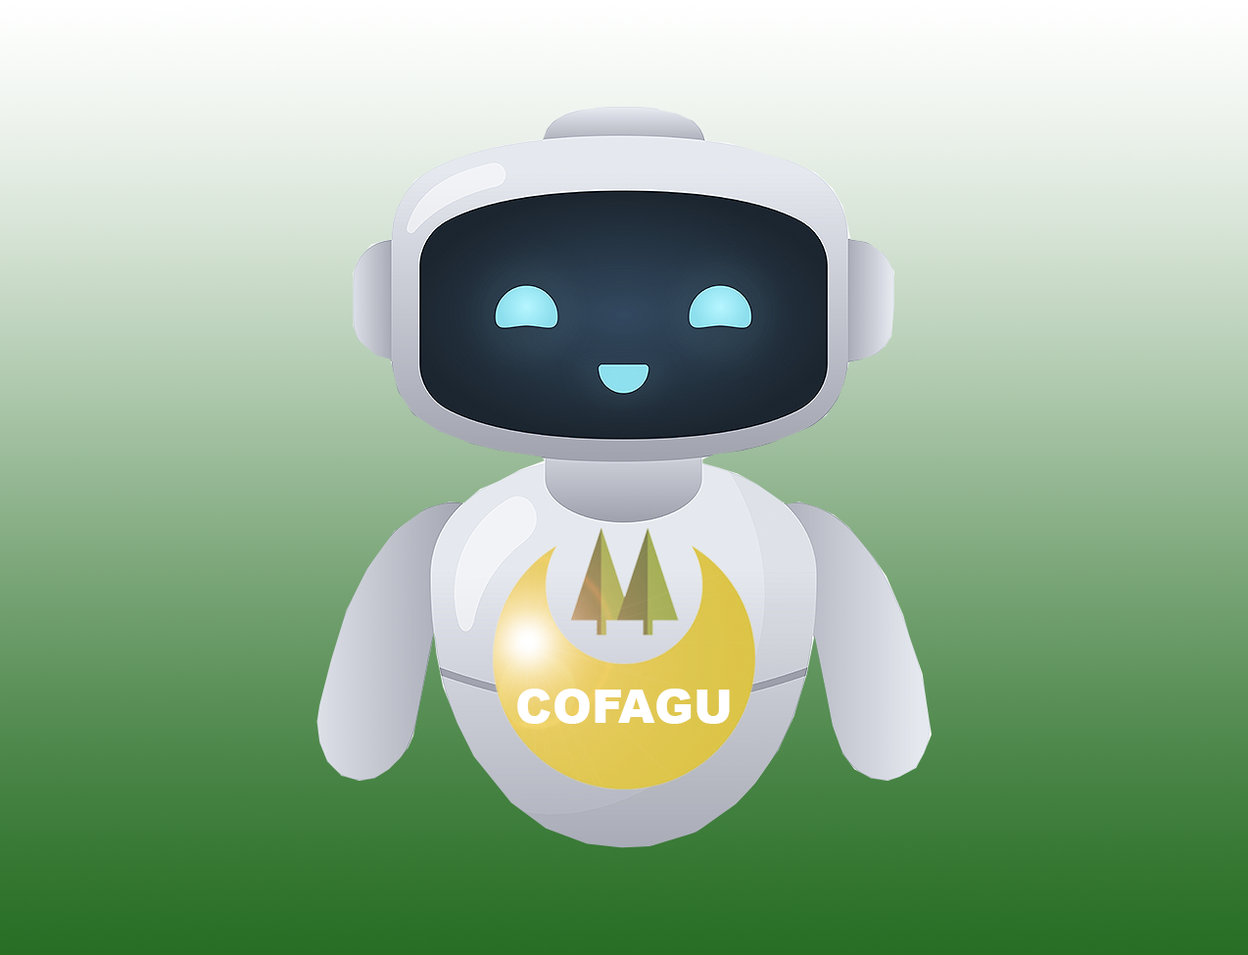
<style>
.page{position:relative;width:1248px;height:955px}
.page>*{position:absolute;margin:0}
.t1{font:47px "Arial-Black";color:#ffffff}
</style>
<div class="page">
<p class="t1" style="left:517px;top:689px;width:213px;height:35px">COFAGU</p>
</div>
